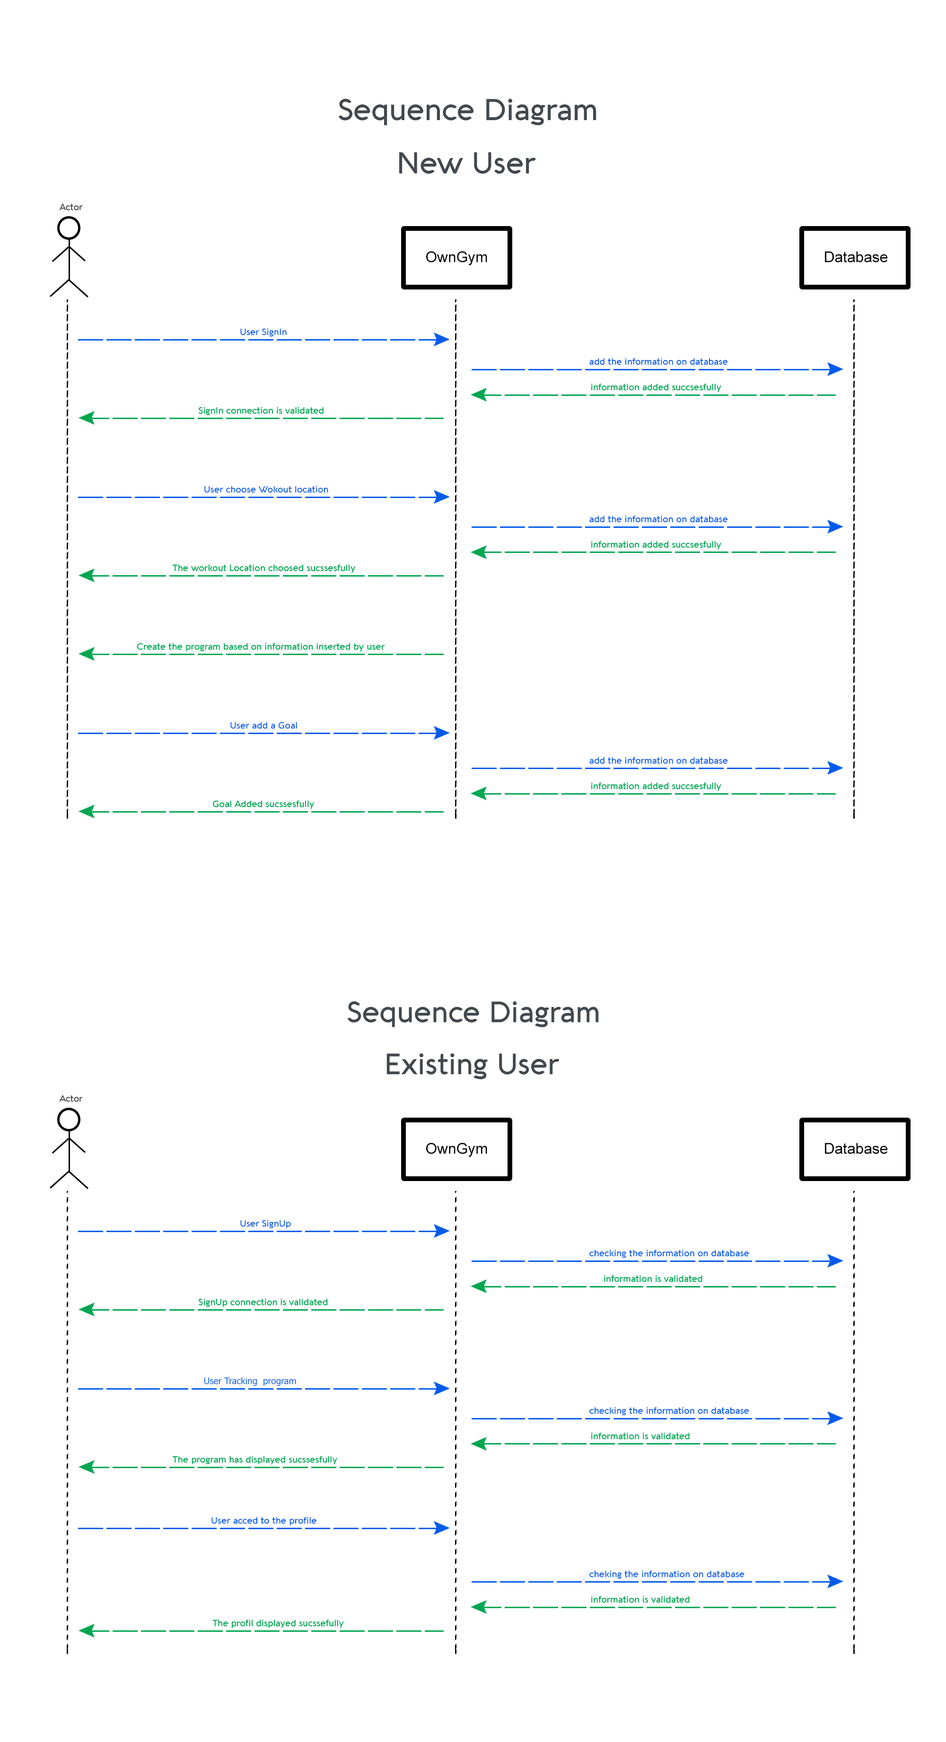
<style>
.page{position:relative;width:946px;height:1742px;background:#ffffff}
.page>*{position:absolute;margin:0}
.t1{font:29.6px "Aquawax-Medium";color:#41484e}
.t2{font:9px "Aquawax-Medium";color:#383838}
.t3{font:15px "ArialMT";color:#000000}
.t4{font:9px "Aquawax-Medium";color:#005bea}
.t5{font:9px "Aquawax-Medium";color:#00a651}
.t6{font:28.8px "Aquawax-Medium";color:#41484e}
.t7{font:9px "Tahoma";color:#005bea}
</style>
<div class="page">
<p class="t1" style="left:338px;top:98px;width:259px;height:27px">Sequence Diagram</p>
<p class="t1" style="left:399px;top:152px;width:137px;height:22px">New User</p>
<p class="t2" style="left:59px;top:203px;width:24px;height:8px">Actor</p>
<p class="t3" style="left:426px;top:251px;width:61px;height:14px">OwnGym</p>
<p class="t3" style="left:825px;top:251px;width:63px;height:12px">Database</p>
<p class="t4" style="left:240px;top:328px;width:47px;height:9px">User SignIn</p>
<p class="t4" style="left:589px;top:358px;width:139px;height:7px">add the information on database</p>
<p class="t5" style="left:591px;top:384px;width:130px;height:8px">information added succsesfully</p>
<p class="t5" style="left:198px;top:407px;width:126px;height:8px">SignIn connection is validated</p>
<p class="t4" style="left:204px;top:486px;width:124px;height:7px">User choose Wokout location</p>
<p class="t4" style="left:589px;top:516px;width:139px;height:7px">add the information on database</p>
<p class="t5" style="left:591px;top:541px;width:130px;height:9px">information added succsesfully</p>
<p class="t5" style="left:173px;top:564px;width:183px;height:9px">The workout Location choosed sucssesfully</p>
<p class="t5" style="left:137px;top:643px;width:248px;height:9px">Create the program based on information inserted by user</p>
<p class="t4" style="left:230px;top:722px;width:67px;height:7px">User add a Goal</p>
<p class="t4" style="left:589px;top:757px;width:139px;height:7px">add the information on database</p>
<p class="t5" style="left:591px;top:782px;width:130px;height:9px">information added succsesfully</p>
<p class="t5" style="left:213px;top:800px;width:102px;height:9px">Goal Added sucssesfully</p>
<p class="t6" style="left:347px;top:1002px;width:252px;height:26px">Sequence Diagram</p>
<p class="t6" style="left:387px;top:1054px;width:173px;height:26px">Existing User</p>
<p class="t2" style="left:59px;top:1095px;width:24px;height:7px">Actor</p>
<p class="t3" style="left:426px;top:1143px;width:61px;height:14px">OwnGym</p>
<p class="t3" style="left:825px;top:1143px;width:63px;height:11px">Database</p>
<p class="t4" style="left:240px;top:1220px;width:51px;height:9px">User SignUp</p>
<p class="t4" style="left:589px;top:1250px;width:160px;height:8px">checking the information on database</p>
<p class="t5" style="left:604px;top:1275px;width:99px;height:8px">information is validated</p>
<p class="t5" style="left:198px;top:1299px;width:130px;height:8px">SignUp connection is validated</p>
<p class="t7" style="left:204px;top:1377px;width:92px;height:9px">User Tracking  program</p>
<p class="t4" style="left:589px;top:1407px;width:160px;height:9px">checking the information on database</p>
<p class="t5" style="left:591px;top:1433px;width:99px;height:7px">information is validated</p>
<p class="t5" style="left:173px;top:1456px;width:164px;height:9px">The program has displayed sucssesfully</p>
<p class="t4" style="left:211px;top:1517px;width:105px;height:9px">User acced to the profile</p>
<p class="t4" style="left:589px;top:1571px;width:156px;height:8px">cheking the information on database</p>
<p class="t5" style="left:591px;top:1596px;width:99px;height:7px">information is validated</p>
<p class="t5" style="left:212px;top:1620px;width:132px;height:8px">The profil displayed sucssefully</p>
</div>
